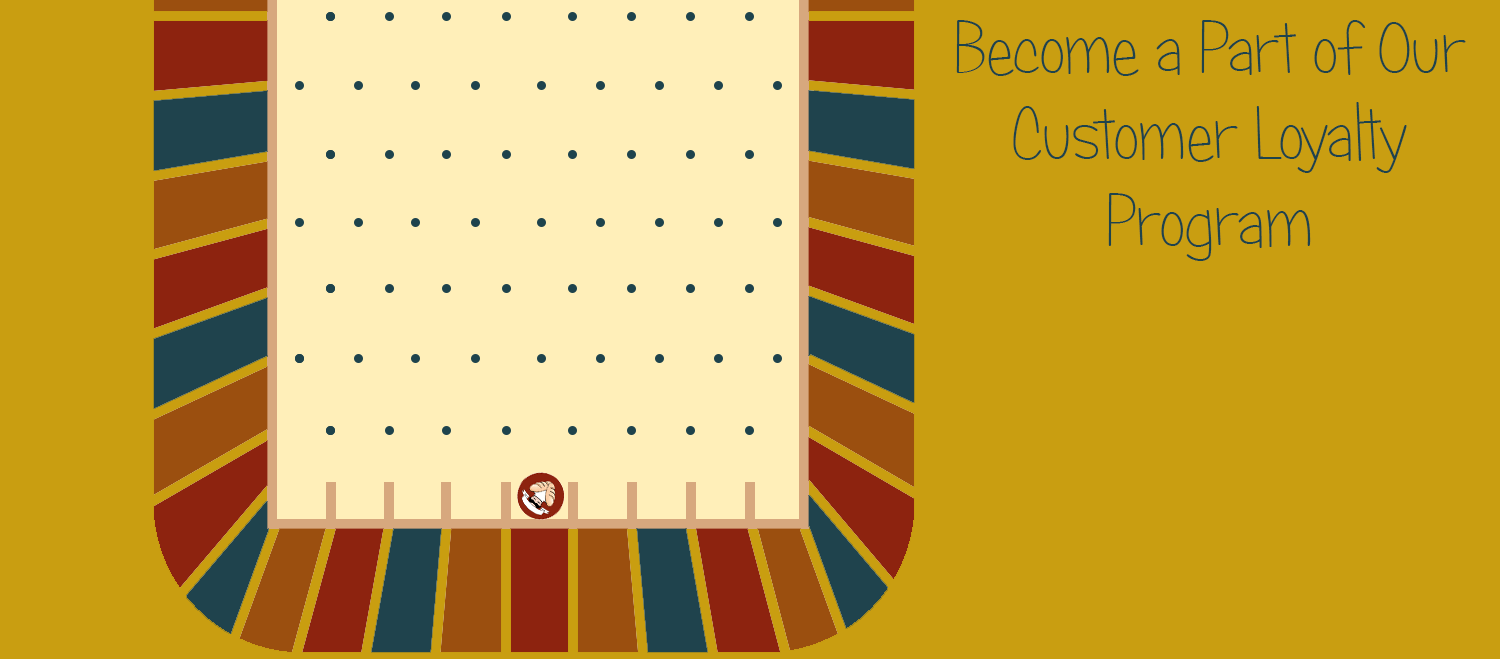
<style>
.page{position:relative;width:1500px;height:659px;background:#c99e11}
.page>*{position:absolute;margin:0}
.t1{font:72px "CandyRoundBTNLt";color:#1e434c}
</style>
<div class="page">
<p class="t1" style="left:956px;top:20px;width:510px;height:241px;text-align:center">Become a Part of Our <br>Customer Loyalty <br>Program</p>
</div>
